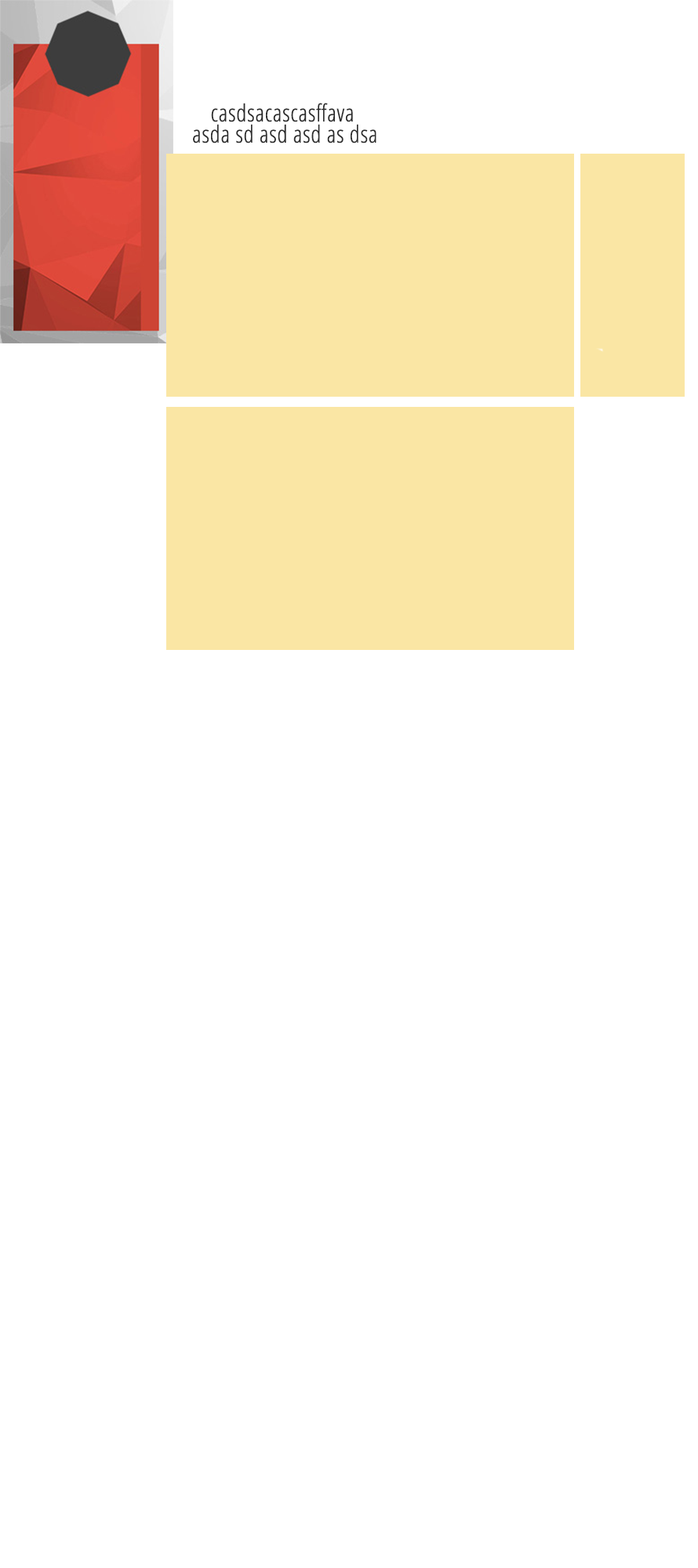
<style>
.page{position:relative;width:698px;height:1568px;background:#ffffff}
.page>*{position:absolute;margin:0}
.t1{font:23.5px/21.2px "OpenSansCondensed-Light";color:#2c2c2c;font-weight:bold}
</style>
<div class="page">
<p class="t1" style="left:193px;top:103px;width:183px;height:40px;text-align:center">casdsacascasffava <br>asda sd asd asd as dsa</p>
</div>
